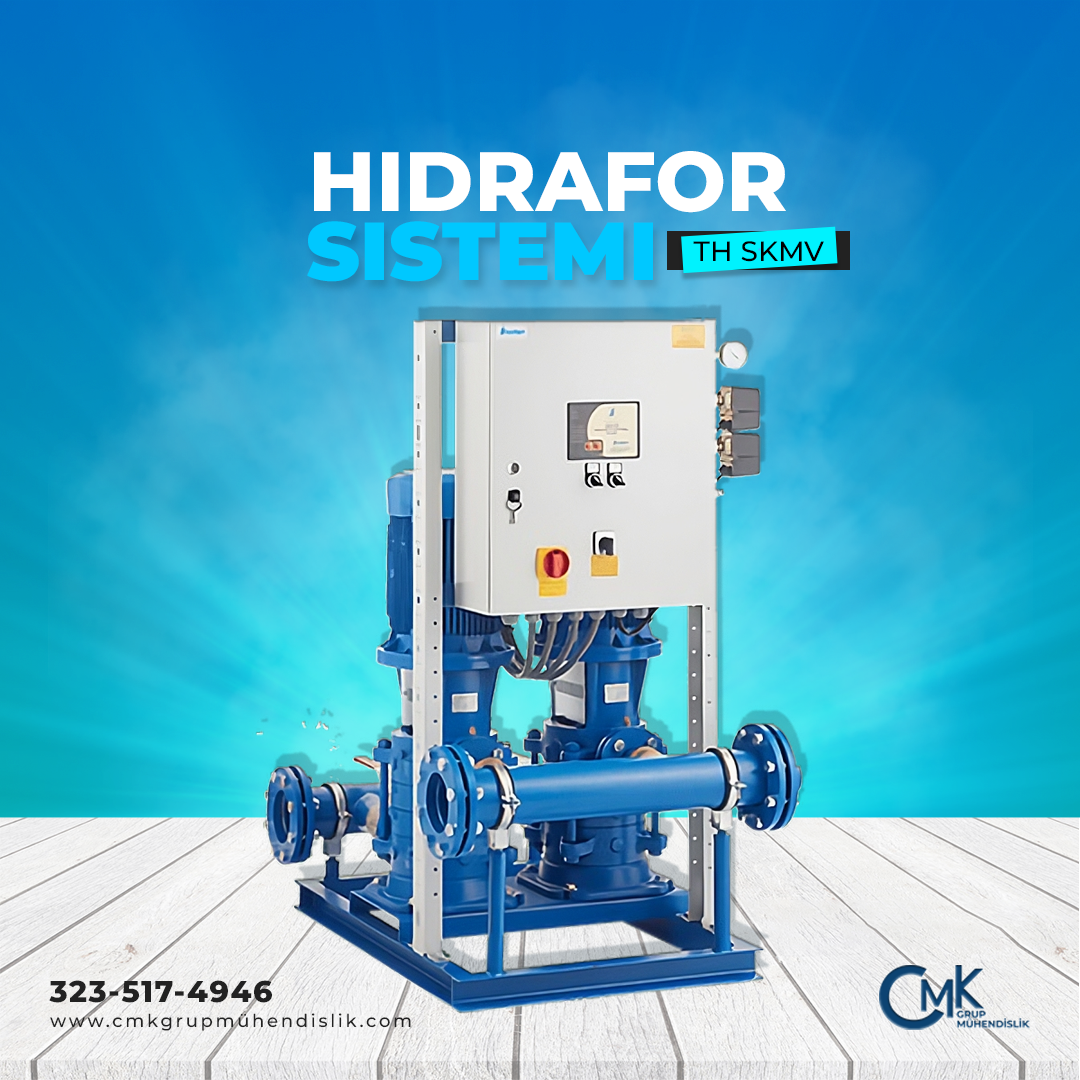
<style>
.page{position:relative;width:1080px;height:1080px}
.page>*{position:absolute;margin:0}
.t1{font:84px "Montserrat-ExtraBold";color:#ffffff;text-transform:uppercase}
.t2{font:82px "Montserrat-Black";color:#00c8ff;text-transform:uppercase}
.t3{font:28px "Montserrat-Medium";color:#000000;text-transform:uppercase}
.t4{font:30px "Montserrat-ExtraBold";letter-spacing:0.05em;color:#222222}
.t5{font:18px "Montserrat-Medium";letter-spacing:0.15em;color:#222222}
</style>
<div class="page">
<p class="t1" style="left:314px;top:151px;width:472px;height:62px">hidrafor</p>
<p class="t2" style="left:307px;top:221px;width:346px;height:61px">sistemi</p>
<p class="t3" style="left:693px;top:241px;width:131px;height:21px">TH SKMV</p>
<p class="t4" style="left:49px;top:980px;width:223px;height:23px">323-517-4946</p>
<p class="t5" style="left:50px;top:1013px;width:361px;height:18px">www.cmkgrupmühendislik.com</p>
</div>
